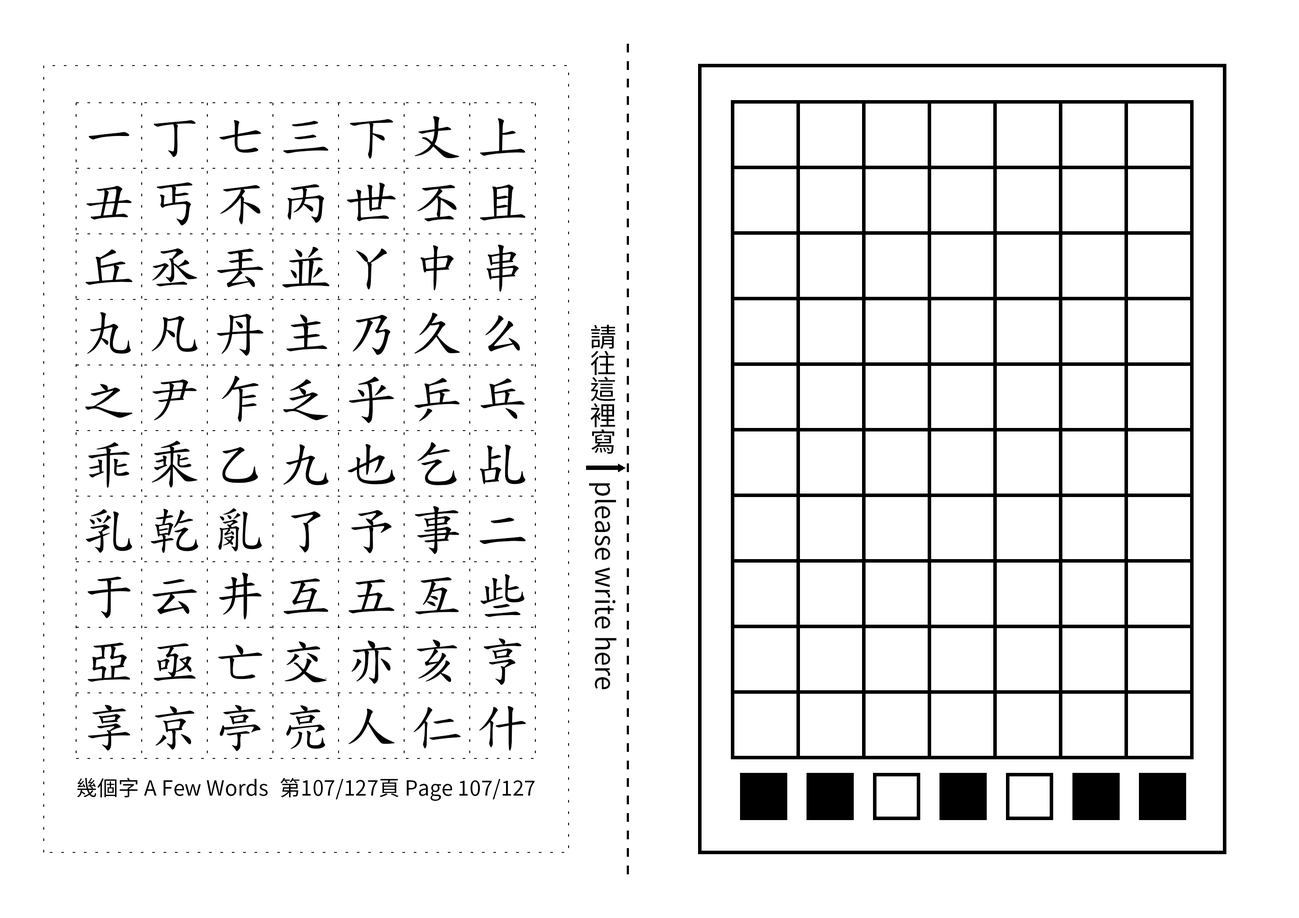
<style>
.page{position:relative;width:1299px;height:918px;background:#ffffff}
.page>*{position:absolute;margin:0}
.t1{font:52.5px/65.6px "TW-Kai-98_1";letter-spacing:0.25em;color:#000000}
.t2{font:26.2px "SourceHanSansTC-Regular";color:#000000}
.t3{font:21px "SourceHanSansTC-Regular";color:#000000}
</style>
<div class="page">
<p class="t1" style="left:85px;top:116px;width:441px;height:636px;text-align:center">一丁七三下丈上丑丐不丙世丕且丘丞丟並丫中串丸凡丹主乃久么之尹乍乏乎乒乓乖乘乙九也乞乩乳乾亂了予事二于云井互五亙些亞亟亡交亦亥亨享京亭亮人仁什</p>
<p class="t2" style="left:589px;top:324px;width:28px;height:366px;text-align:center">請往這裡寫　please write here</p>
<p class="t3" style="left:77px;top:778px;width:191px;height:20px">幾個字 A Few Words</p>
<p class="t3" style="left:280px;top:778px;width:255px;height:23px">第107/127頁 Page 107/127</p>
</div>
